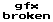
<style>
.page{position:relative;width:53px;height:22px;background:#ffffff}
.page>*{position:absolute;margin:0}
.t1{font:8px "PressStart2P";color:#000000}
</style>
<div class="page">
<p class="t1" style="left:3px;top:2px;width:47px;height:17px;text-align:center">gfx<br>broken</p>
</div>
